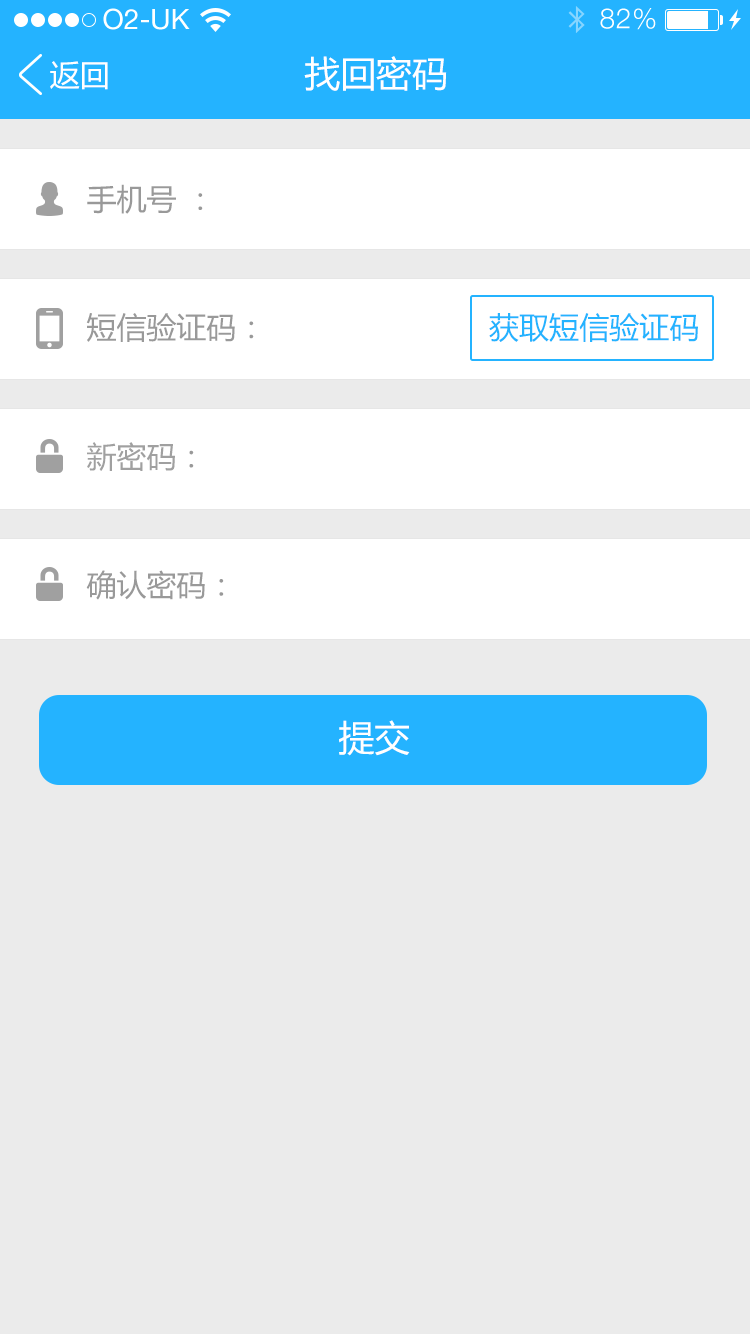
<style>
.page{position:relative;width:750px;height:1334px;background:#ebebeb}
.page>*{position:absolute;margin:0}
.t1{font:30px "MicrosoftYaHei";color:#ffffff}
.t2{font:36px "MicrosoftYaHei";color:#ffffff}
.t3{font:30px "MicrosoftYaHei";color:#999999}
.t4{font:30px "MicrosoftYaHei";color:#24b3ff}
.t5{font:30px "MicrosoftYaHei";color:#a0a0a0}
</style>
<div class="page">
<p class="t1" style="left:50px;top:61px;width:58px;height:29px">返回</p>
<p class="t2" style="left:304px;top:56px;width:143px;height:35px">找回密码</p>
<p class="t3" style="left:87px;top:184px;width:116px;height:30px">手机号 ：</p>
<p class="t3" style="left:86px;top:313px;width:168px;height:29px">短信验证码：</p>
<p class="t4" style="left:489px;top:313px;width:209px;height:29px">获取短信验证码</p>
<p class="t5" style="left:87px;top:442px;width:107px;height:29px">新密码<span class="t3">：</span></p>
<p class="t3" style="left:86px;top:570px;width:138px;height:30px">确认密码：</p>
<p class="t2" style="left:339px;top:720px;width:71px;height:36px">提交</p>
</div>
